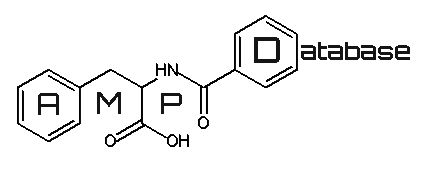
<style>
.page{position:relative;width:423px;height:169px;background:#ffffff}
.page>*{position:absolute;margin:0}
.t1{font:36px "Orbitron-Medium";color:#151515}
.t2{font:24px "Orbitron-Medium";color:#151515}
.t3{font:30px "Orbitron-Medium";color:#151515}
</style>
<div class="page">
<p class="t1" style="left:254px;top:37px;width:26px;height:26px">D</p>
<p class="t2" style="left:301px;top:42px;width:109px;height:18px">atabase</p>
<p class="t3" style="left:38px;top:93px;width:21px;height:22px">A</p>
<p class="t3" style="left:97px;top:92px;width:24px;height:22px">M</p>
<p class="t3" style="left:161px;top:93px;width:21px;height:21px">P</p>
</div>
